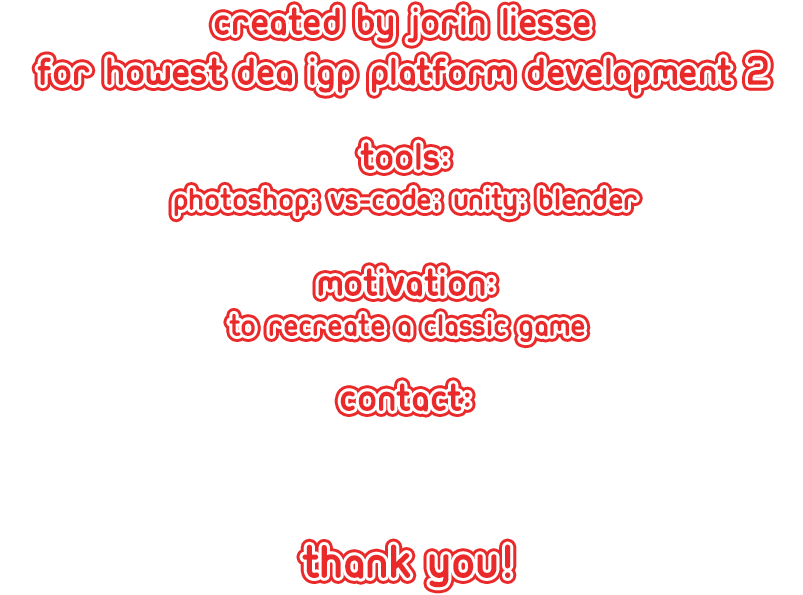
<style>
.page{position:relative;width:803px;height:595px;background:#ffffff}
.page>*{position:absolute;margin:0}
.t1{font:41.7px "Ubuntu-Title";color:#ea2a2a}
.t2{font:33.3px "Ubuntu-Title";color:#ea2a2a}
.t3{font:50px "Ubuntu-Title";color:#ea2a2a}
</style>
<div class="page">
<p class="t1" style="left:37px;top:7px;width:731px;height:86px;text-align:center">Created by Jorin Liesse<br>for Howest DEA IGP Platform Development 2</p>
<p class="t2" style="left:174px;top:142px;width:463px;height:75px;text-align:center"><span class="t1">Tools:<br></span>Photoshop; VS-Code; Unity; Blender</p>
<p class="t2" style="left:229px;top:268px;width:356px;height:75px;text-align:center"><span class="t1">Motivation:<br></span>To recreate a classic game</p>
<p class="t1" style="left:340px;top:383px;width:130px;height:29px">Contact:</p>
<p class="t3" style="left:302px;top:544px;width:209px;height:44px">thank you!</p>
</div>
